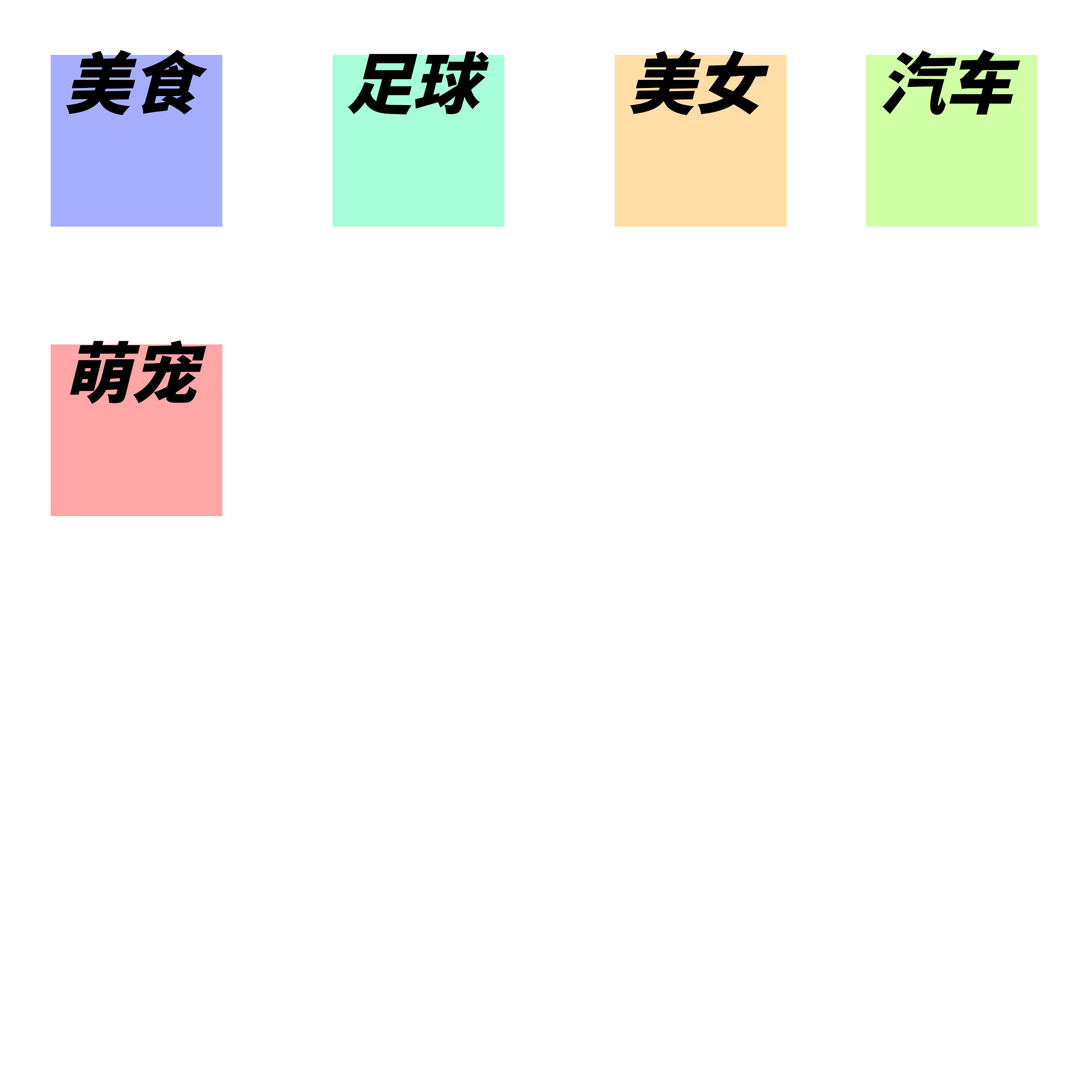
<style>
.page{position:relative;width:1092px;height:1092px;background:#ffffff}
.page>*{position:absolute;margin:0}
.t1{font:66.6px "Source-KeynoteartHans-Regular";color:#000000}
</style>
<div class="page">
<p class="t1" style="left:66px;top:50px;width:141px;height:65px">美食</p>
<p class="t1" style="left:348px;top:51px;width:141px;height:64px">足球</p>
<p class="t1" style="left:630px;top:50px;width:139px;height:65px">美女</p>
<p class="t1" style="left:882px;top:50px;width:138px;height:65px">汽车</p>
<p class="t1" style="left:70px;top:340px;width:136px;height:64px">萌宠</p>
</div>
